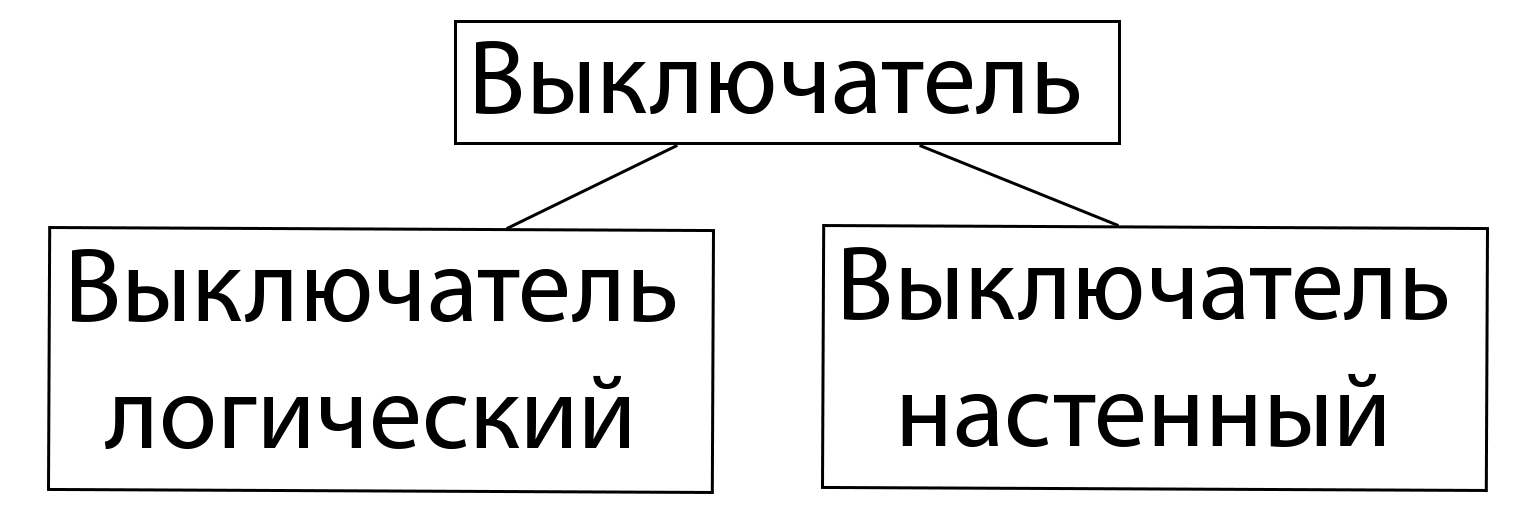
<style>
.page{position:relative;width:1521px;height:519px;background:#ffffff}
.page>*{position:absolute;margin:0}
.t1{font:105.8px "MyriadPro-Regular";color:#000000}
</style>
<div class="page">
<p class="t1" style="left:476px;top:41px;width:603px;height:74px">Выключатель</p>
<p class="t1" style="left:72px;top:249px;width:603px;height:201px;text-align:center">Выключатель<br>логический</p>
<p class="t1" style="left:844px;top:247px;width:603px;height:201px;text-align:center">Выключатель<br>настенный</p>
</div>
